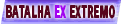
<style>
.page{position:relative;width:122px;height:24px;background:#57051f}
.page>*{position:absolute;margin:0}
.t1{font:16px "RodinNTLGPro-UB";letter-spacing:0.015em;color:#57051f;scale:0.53 1}
.t2{font:16px "RodinNTLGPro-UB";letter-spacing:0.015em;color:#a204f0;scale:0.53 1}
</style>
<div class="page">
<p class="t1" style="left:6px;top:5px;width:109px;height:14px">BATALHA <span class="t2">EX</span> EXTREMO</p>
</div>
